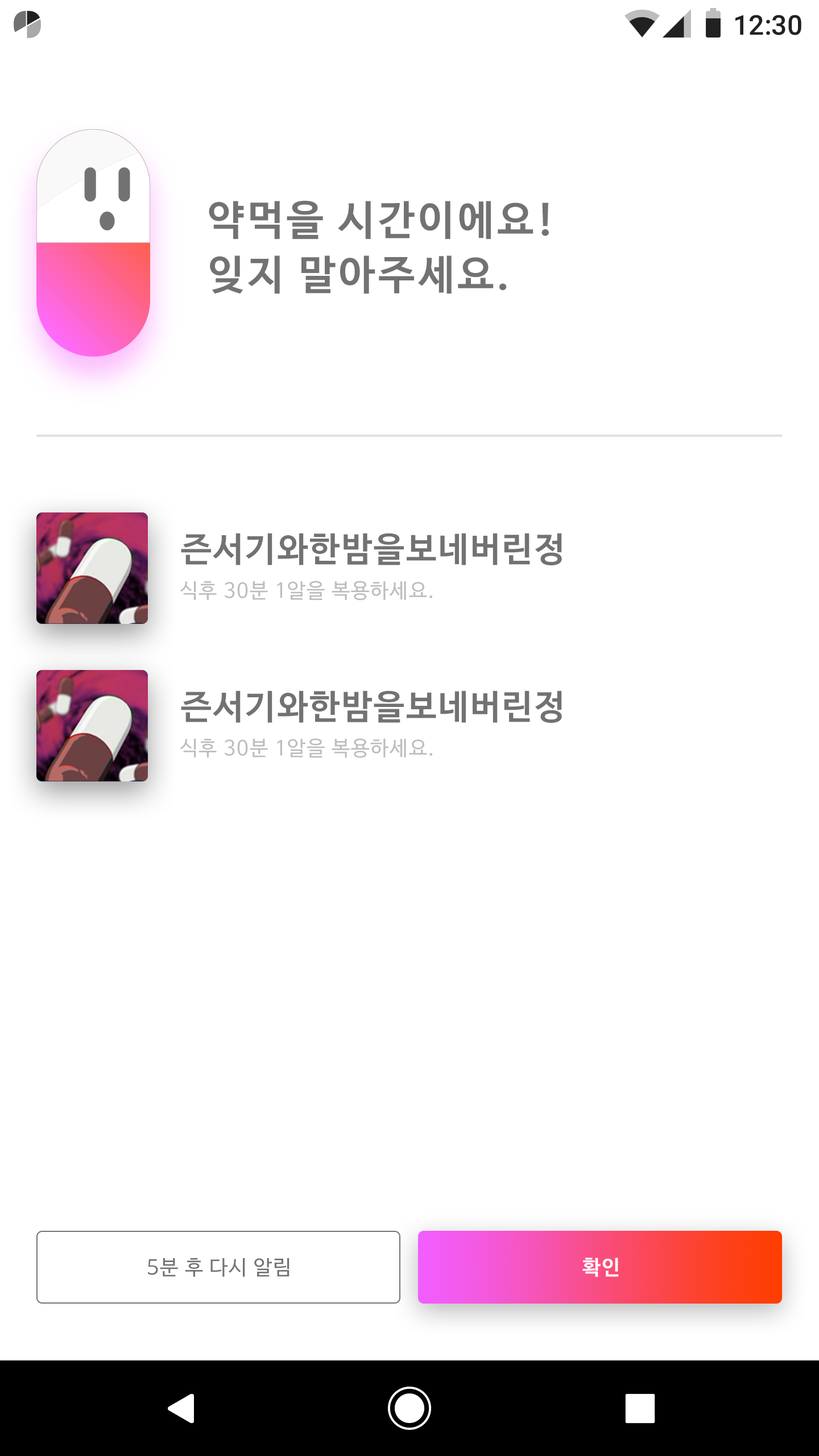
<style>
.page{position:relative;width:819px;height:1456px;background:#ffffff}
.page>*{position:absolute;margin:0}
.t1{font:27.3px "Roboto-Medium";color:#212121}
.t2{font:40.9px/54.6px "NanumBarunGothicBold";letter-spacing:0.075em;color:#727272}
.t3{font:34.1px "NanumBarunGothicBold";letter-spacing:0.05em;color:#727272}
.t4{font:20.5px "NanumBarunGothic";letter-spacing:0.05em;color:#bdbdbd}
.t5{font:20.5px "NanumBarunGothic";letter-spacing:0.05em;color:#727272}
.t6{font:20.5px "NanumBarunGothicBold";letter-spacing:0.05em;color:#ffffff}
</style>
<div class="page">
<p class="t1" style="left:735px;top:15px;width:66px;height:20px">12:30</p>
<p class="t2" style="left:209px;top:201px;width:340px;height:93px">약먹을 시간이에요! <br>잊지 말아주세요.</p>
<p class="t3" style="left:181px;top:533px;width:381px;height:32px">즌서기와한밤을보네버린정</p>
<p class="t4" style="left:180px;top:581px;width:253px;height:20px">식후 30분 1알을 복용하세요.</p>
<p class="t3" style="left:181px;top:690px;width:381px;height:33px">즌서기와한밤을보네버린정</p>
<p class="t4" style="left:180px;top:738px;width:253px;height:20px">식후 30분 1알을 복용하세요.</p>
<p class="t5" style="left:148px;top:1258px;width:141px;height:19px">5분 후 다시 알림</p>
<p class="t6" style="left:582px;top:1257px;width:37px;height:20px">확인</p>
</div>
